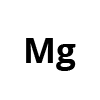
<style>
.page{position:relative;width:100px;height:100px;background:#ffffff}
.page>*{position:absolute;margin:0}
.t1{font:35px "OpenSans-Bold";color:#000000}
</style>
<div class="page">
<p class="t1" style="left:26px;top:38px;width:50px;height:33px">Mg</p>
</div>
